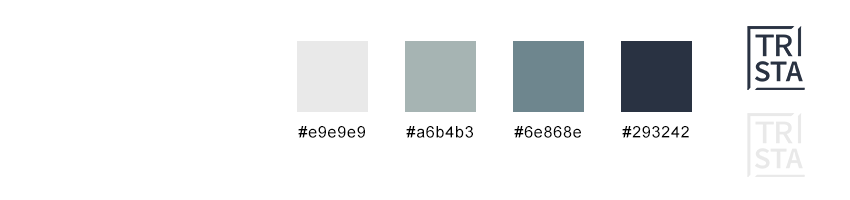
<style>
.page{position:relative;width:850px;height:200px;background:#ffffff}
.page>*{position:absolute;margin:0}
.t1{font:16px "ArialMT";letter-spacing:0.05em;color:#010101}
</style>
<div class="page">
<p class="t1" style="left:298px;top:126px;width:67px;height:12px">#e9e9e9</p>
<p class="t1" style="left:406px;top:126px;width:67px;height:12px">#a6b4b3</p>
<p class="t1" style="left:514px;top:126px;width:67px;height:12px">#6e868e</p>
<p class="t1" style="left:622px;top:126px;width:67px;height:12px">#293242</p>
</div>
